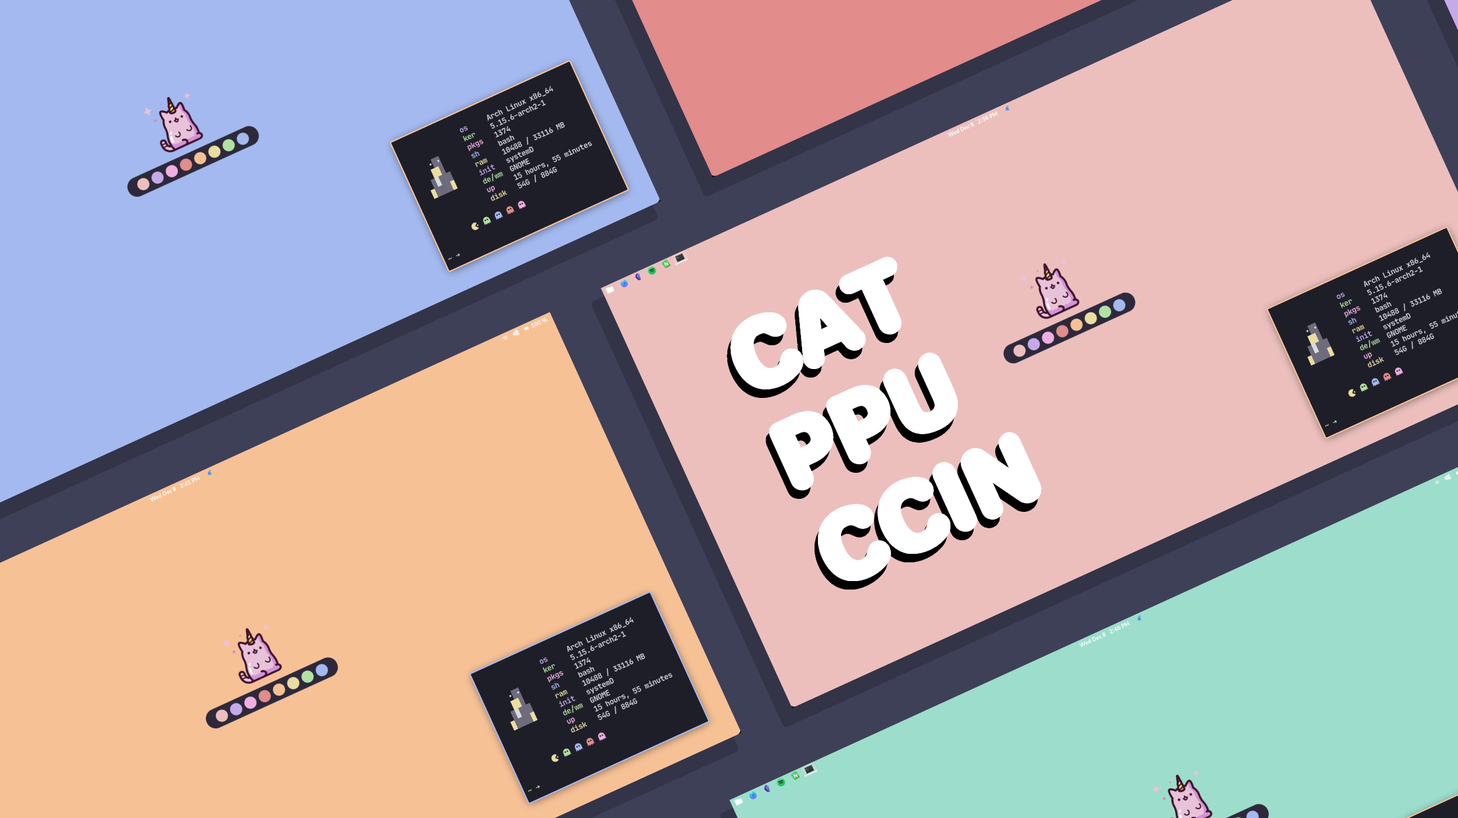
<style>
.page{position:relative;width:1458px;height:818px;background:#ecbfbd}
.page>*{position:absolute;margin:0}
.t1{font:87.8px "Jellee-Roman";color:#ffffff}
</style>
<div class="page">
<p class="t1" style="left:729px;top:259px;width:311px;height:324px;rotate:-24deg">CAT<br>PPU<br>CCIN</p>
</div>
